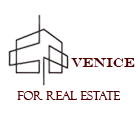
<style>
.page{position:relative;width:136px;height:117px;background:#ffffff}
.page>*{position:absolute;margin:0}
.t1{font:13px "EngraversMT";color:#530000}
.t2{font:12px "FelixTitlingMT";color:#530000}
</style>
<div class="page">
<p class="t1" style="left:71px;top:58px;width:64px;height:9px">VENICE</p>
<p class="t2" style="left:17px;top:91px;width:103px;height:9px">FOR REAL ESTATE</p>
</div>
